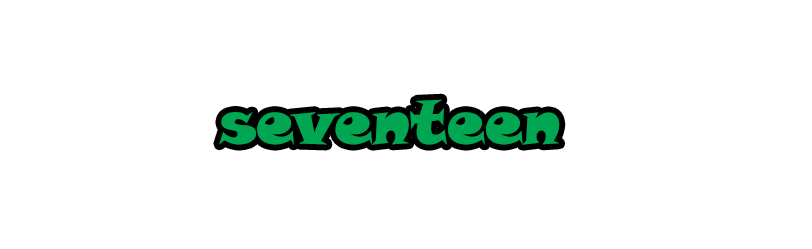
<style>
.page{position:relative;width:812px;height:249px;background:#ffffff}
.page>*{position:absolute;margin:0}
.t1{font:60px "SnapITC-Regular";color:#00a651}
</style>
<div class="page">
<p class="t1" style="left:219px;top:99px;width:341px;height:46px">seventeen</p>
</div>
